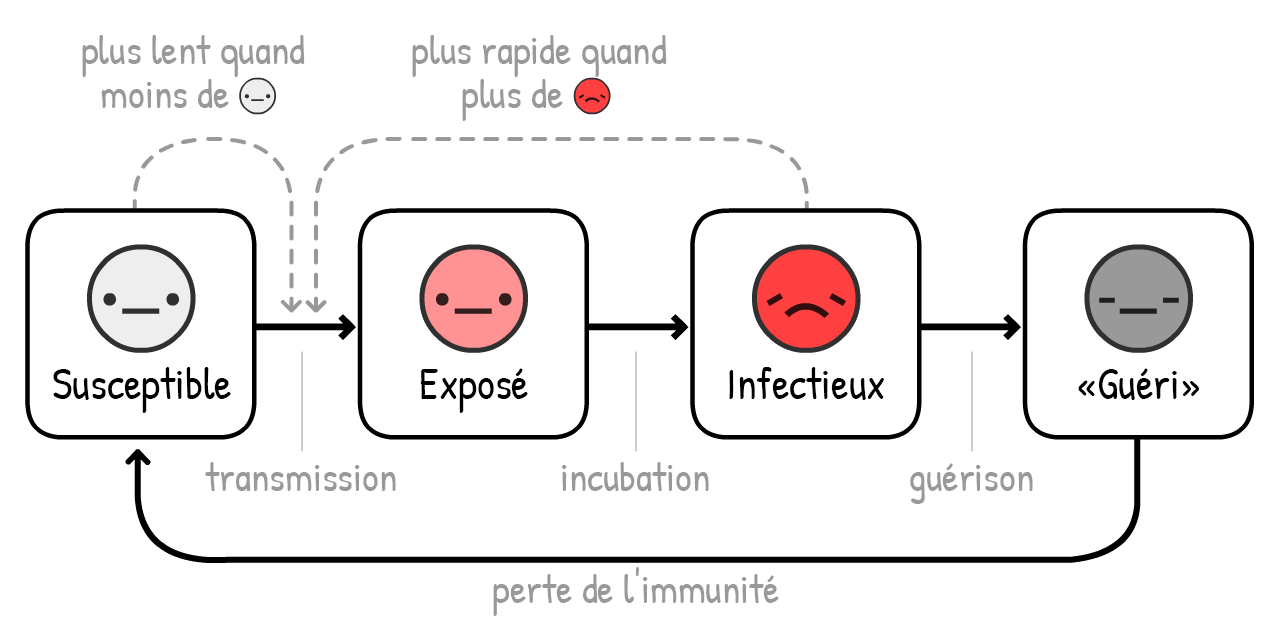
<style>
.page{position:relative;width:1280px;height:640px;background:#ffffff}
.page>*{position:absolute;margin:0}
.t1{font:70px "PatrickHand-Regular";color:#999999}
.t2{font:75px "PatrickHand-Regular";color:#000000}
</style>
<div class="page">
<p class="t1" style="left:82px;top:35px;width:223px;height:42px">plus lent quand</p>
<p class="t1" style="left:412px;top:35px;width:255px;height:42px">plus rapide quand</p>
<p class="t1" style="left:101px;top:79px;width:128px;height:29px">moins de</p>
<p class="t1" style="left:462px;top:79px;width:101px;height:42px">plus de</p>
<p class="t2" style="left:53px;top:367px;width:178px;height:46px">Susceptible</p>
<p class="t2" style="left:420px;top:368px;width:108px;height:45px">Exposé</p>
<p class="t2" style="left:729px;top:367px;width:155px;height:33px">Infectieux</p>
<p class="t2" style="left:1078px;top:368px;width:121px;height:32px">«Guéri»</p>
<p class="t1" style="left:205px;top:462px;width:191px;height:29px">transmission</p>
<p class="t1" style="left:562px;top:462px;width:147px;height:29px">incubation</p>
<p class="t1" style="left:910px;top:463px;width:123px;height:41px">guérison</p>
<p class="t1" style="left:493px;top:567px;width:286px;height:49px">perte de l'immunité</p>
</div>
